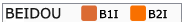
<style>
.page{position:relative;width:182px;height:22px;background:#fafafa}
.page>*{position:absolute;margin:0}
.t1{font:14px "Verdana";color:#181818}
.t2{font:11px "Verdana";color:#000000}
</style>
<div class="page">
<p class="t1" style="left:6px;top:7px;width:55px;height:12px">BEIDOU</p>
<p class="t2" style="left:100px;top:10px;width:18px;height:9px">B1I</p>
<p class="t2" style="left:149px;top:9px;width:18px;height:10px">B2I</p>
</div>
